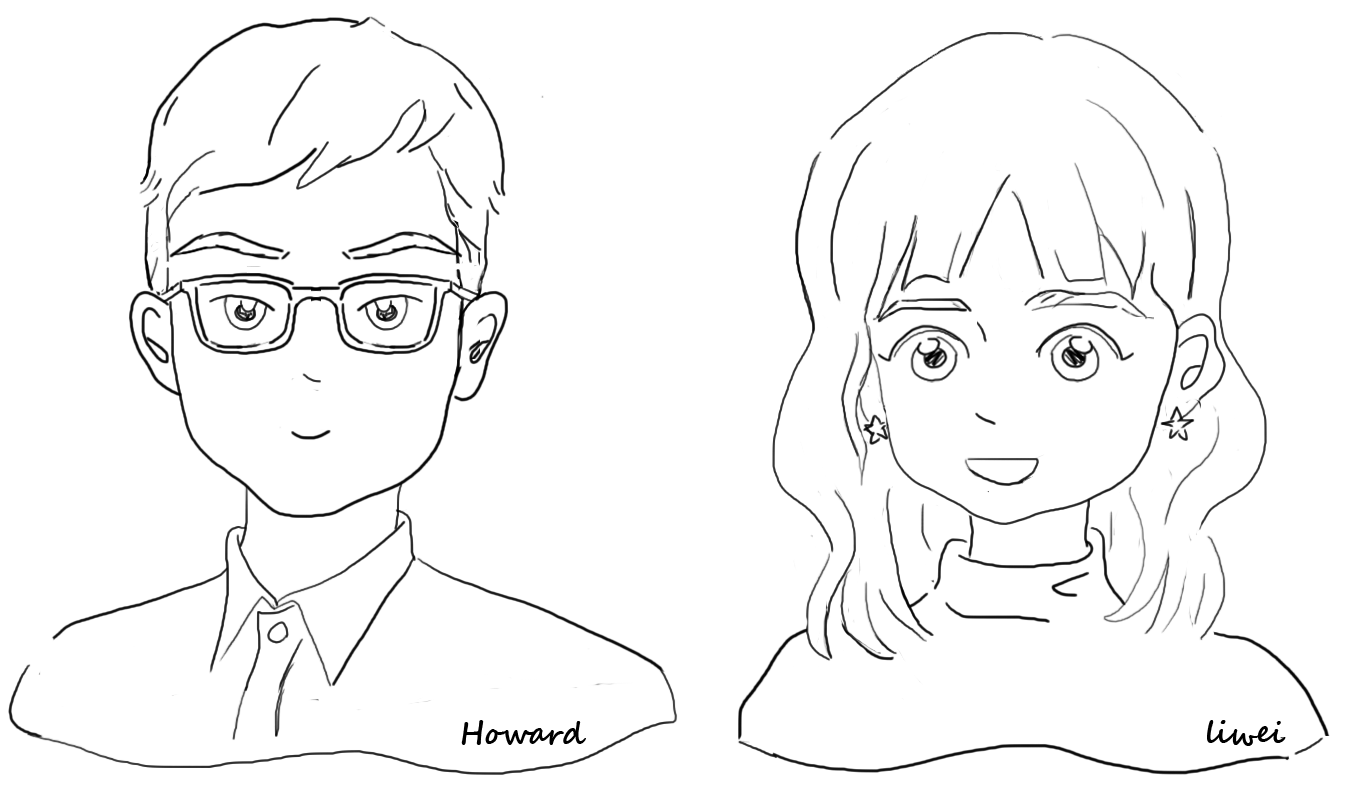
<style>
.page{position:relative;width:1349px;height:789px;background:#ffffff}
.page>*{position:absolute;margin:0}
.t1{font:30px "SegoeScript-Bold";color:#000000}
</style>
<div class="page">
<p class="t1" style="left:461px;top:720px;width:125px;height:25px">Howard</p>
<p class="t1" style="left:1207px;top:720px;width:79px;height:26px">liwei</p>
</div>
